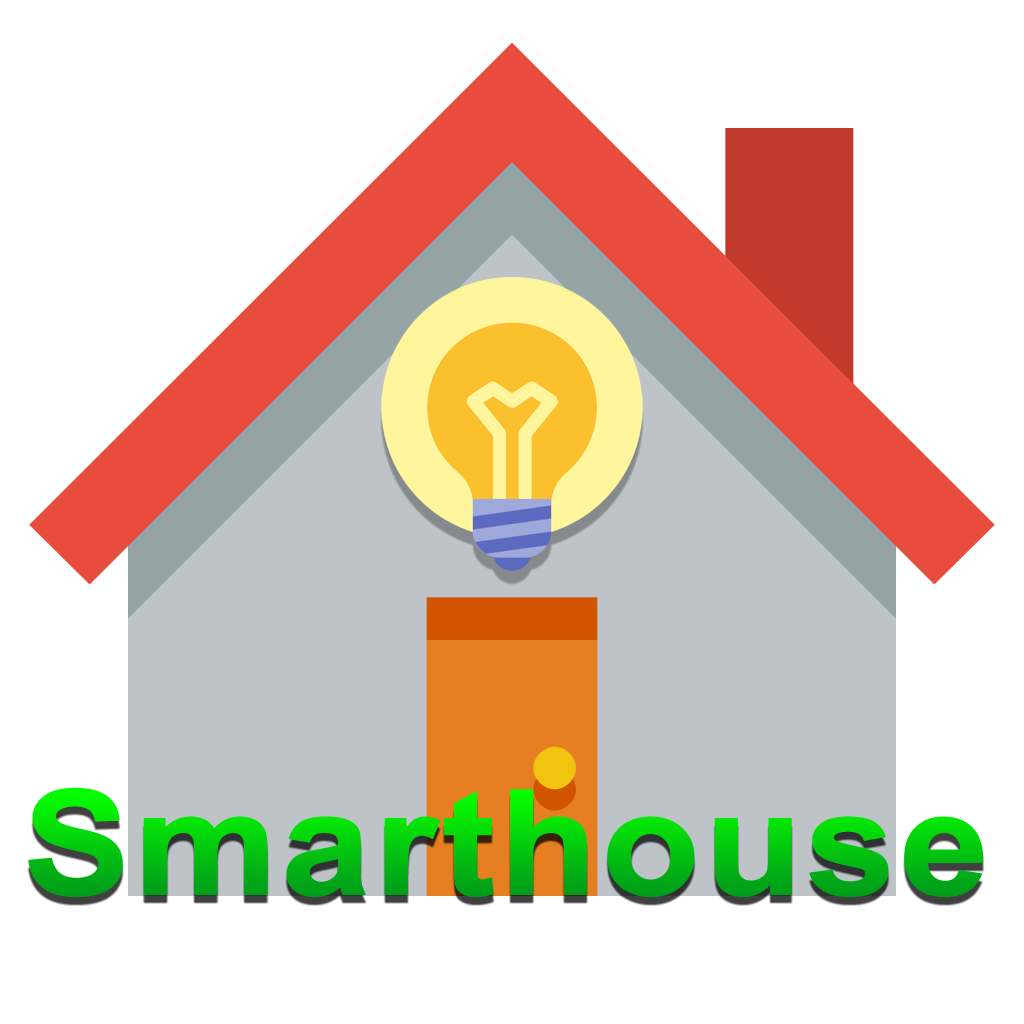
<style>
.page{position:relative;width:1024px;height:1024px;background:#ffffff}
.page>*{position:absolute;margin:0}
.t1{font:249.9px "Arial-BoldMT";font-weight:bold;scale:1.1 1}
</style>
<div class="page">
<p class="t1" style="left:28px;top:787px;width:956px;height:110px">Smarthouse</p>
</div>
